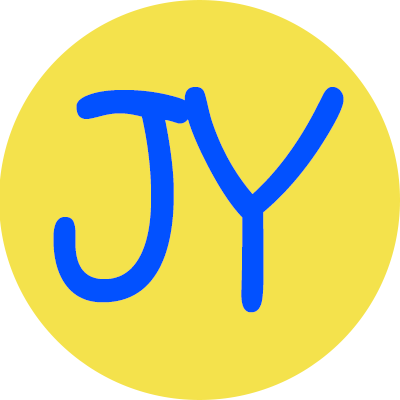
<style>
.page{position:relative;width:400px;height:400px;background:#f4e24c}
.page>*{position:absolute;margin:0}
.t1{font:240px "KristenITC-Regular";color:#0251ff;text-transform:uppercase;scale:0.9 1}
</style>
<div class="page">
<p class="t1" style="left:53px;top:87px;width:291px;height:226px">JY</p>
</div>
